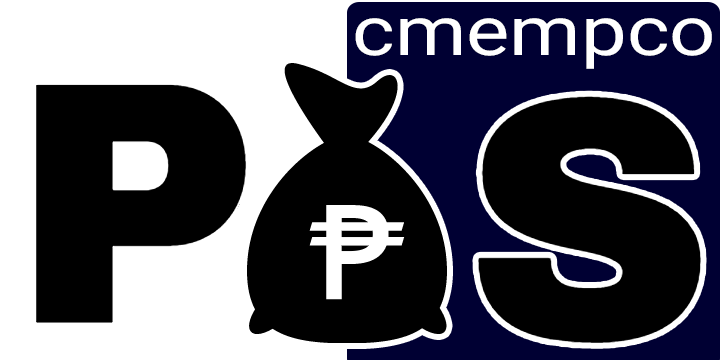
<style>
.page{position:relative;width:720px;height:360px;background:#000000}
.page>*{position:absolute;margin:0}
.t1{font:68.4px "Roboto-Regular";color:#ffffff;scale:1.19 1}
</style>
<div class="page">
<p class="t1" style="left:355px;top:18px;width:357px;height:51px">cmempco</p>
</div>
